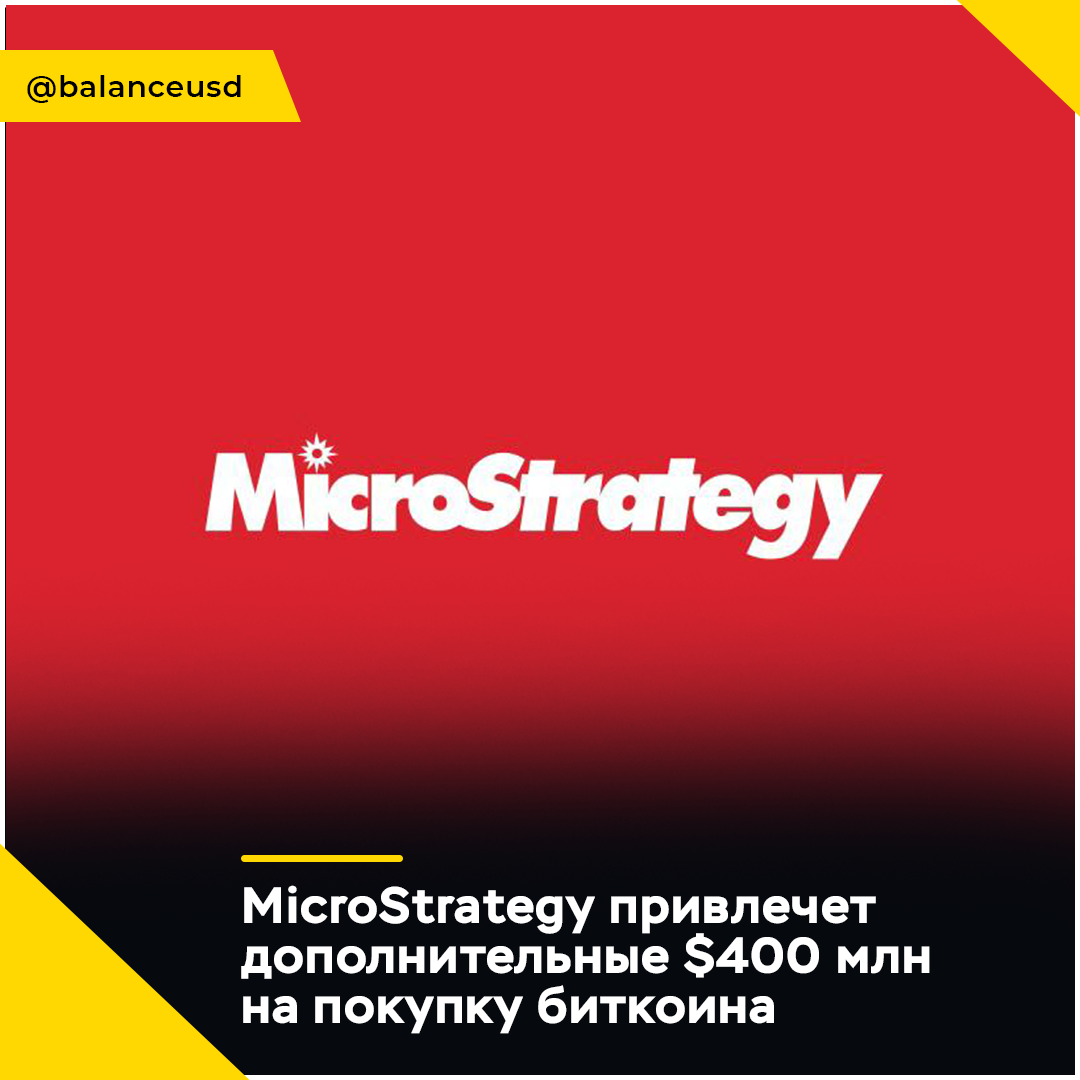
<style>
.page{position:relative;width:1080px;height:1080px;background:#db232f}
.page>*{position:absolute;margin:0}
.t1{font:30px "Montserrat-SemiBold";letter-spacing:0.025em;color:#000000}
.t2{font:51px/50px "Stem-Regular";letter-spacing:0.025em;color:#ffffff}
</style>
<div class="page">
<p class="t1" style="left:27px;top:75px;width:214px;height:28px">@balanсeusd</p>
<p class="t2" style="left:241px;top:885px;width:689px;height:149px">MicroStrategy привлечет<br>дополнительные $400 млн<br>на покупку биткоина</p>
</div>
